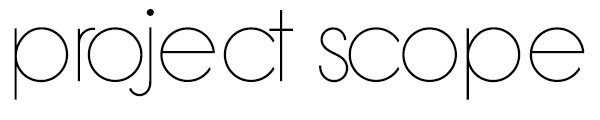
<style>
.page{position:relative;width:600px;height:120px;background:#ffffff}
.page>*{position:absolute;margin:0}
.t1{font:70.8px "BondoluoPeek";color:#000000}
</style>
<div class="page">
<p class="t1" style="left:14px;top:8px;width:571px;height:92px">project scope</p>
</div>
